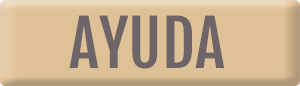
<style>
.page{position:relative;width:300px;height:86px;background:#dfc197}
.page>*{position:absolute;margin:0}
.t1{font:63px "FjallaOne-Regular";color:#6e6568;text-transform:uppercase}
</style>
<div class="page">
<p class="t1" style="left:69px;top:15px;width:156px;height:54px">AYUDA</p>
</div>
